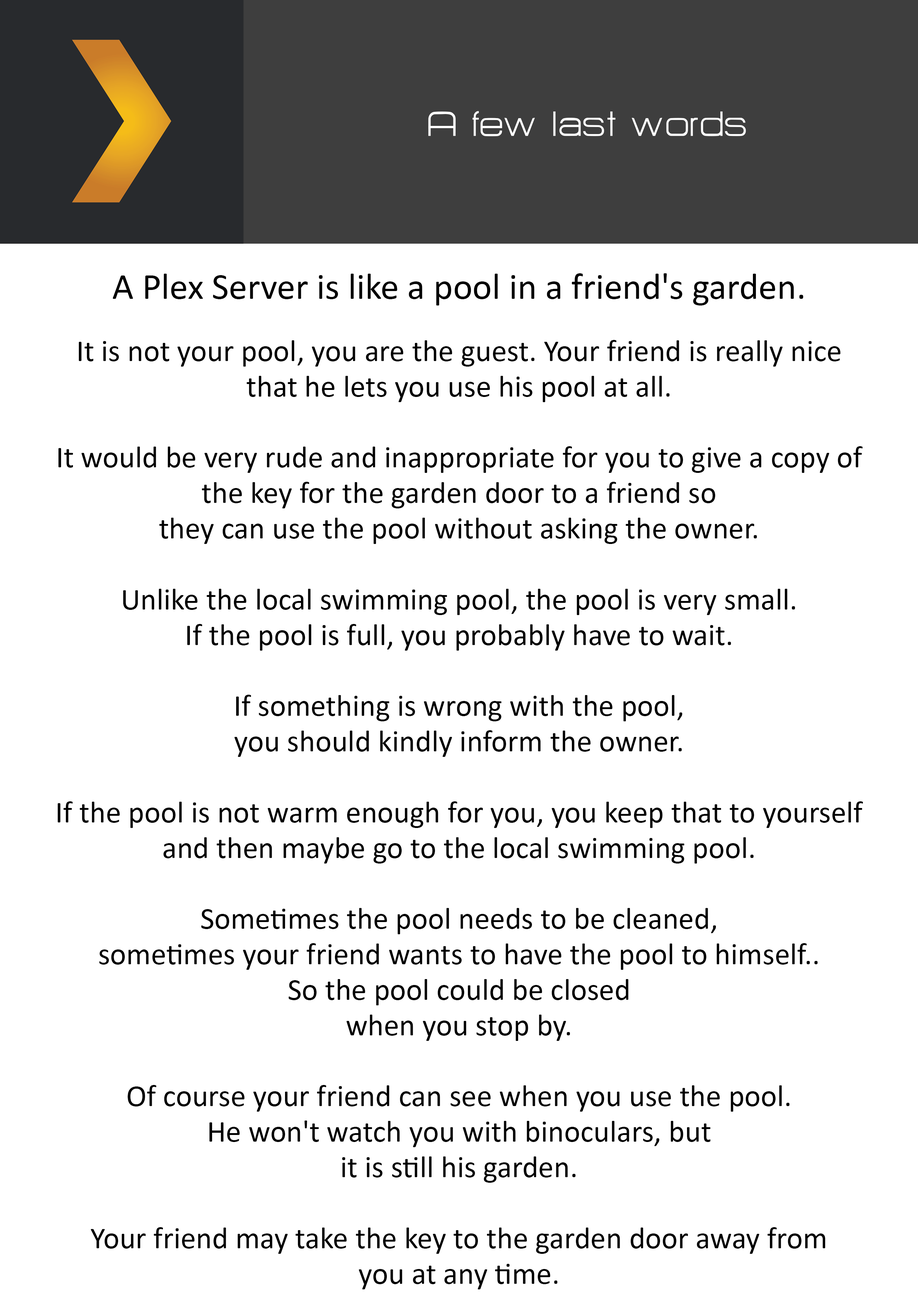
<style>
.page{position:relative;width:918px;height:1299px;background:#ffffff}
.page>*{position:absolute;margin:0}
.t1{font:43.2px "HURTMOLDPersonalUse-Regular";color:#ffffff}
.t2{font:37px "Calibri";color:#000000}
.t3{font:30.9px/35.5px "Calibri";color:#000000}
</style>
<div class="page">
<p class="t1" style="left:428px;top:111px;width:318px;height:25px">A few last words</p>
<p class="t2" style="left:113px;top:273px;width:690px;height:32px">A Plex Server is like a pool in a friend's garden.</p>
<p class="t3" style="left:58px;top:340px;width:805px;height:949px;text-align:center">It is not your pool, you are the guest. Your friend is really nice<br>that he lets you use his pool at all.<br><br>It would be very rude and inappropriate for you to give a copy of<br>the key for the garden door to a friend so<br>they can use the pool without asking the owner.<br><br>Unlike the local swimming pool, the pool is very small.<br>If the pool is full, you probably have to wait.<br><br>If something is wrong with the pool,<br>you should kindly inform the owner.<br><br>If the pool is not warm enough for you, you keep that to yourself<br>and then maybe go to the local swimming pool.<br><br>Sometimes the pool needs to be cleaned,<br>sometimes your friend wants to have the pool to himself..<br>So the pool could be closed<br>when you stop by.<br><br>Of course your friend can see when you use the pool.<br>He won't watch you with binoculars, but<br>it is still his garden.<br><br>Your friend may take the key to the garden door away from<br>you at any time.</p>
</div>
